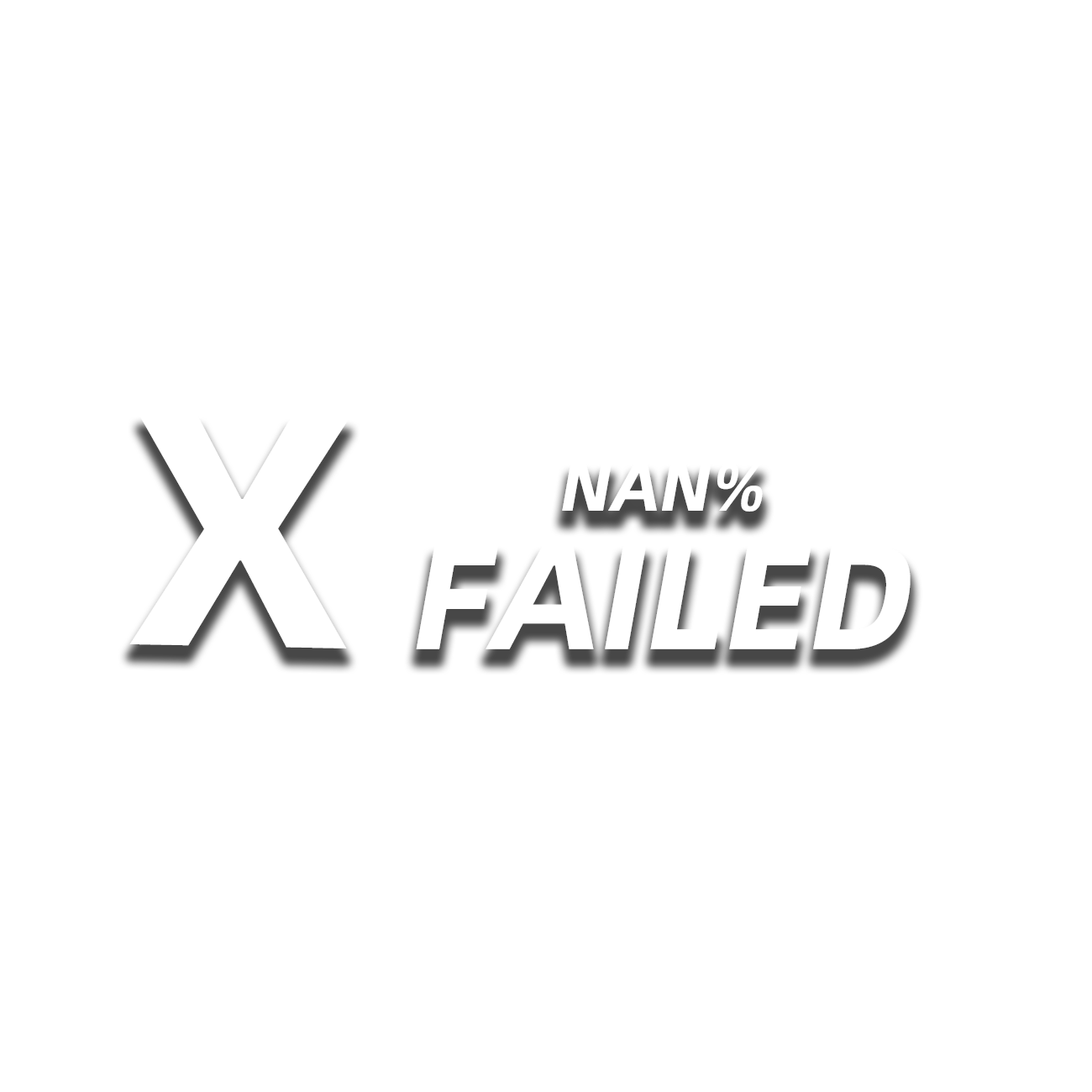
<style>
.page{position:relative;width:1092px;height:1092px;background:#ffffff}
.page>*{position:absolute;margin:0}
.t1{font:329.9px "AlibabaPuHuiTiB";color:#ffffff}
.t2{font:67.1px "AlibabaPuHuiTiB";color:#ffffff;font-style:italic}
.t3{font:149.2px "AlibabaPuHuiTiB";color:#ffffff;font-style:italic}
</style>
<div class="page">
<p class="t1" style="left:129px;top:415px;width:220px;height:233px;rotate:1deg">X</p>
<p class="t2" style="left:562px;top:463px;width:201px;height:49px">NAN%</p>
<p class="t3" style="left:416px;top:545px;width:495px;height:104px">FAILED</p>
</div>
